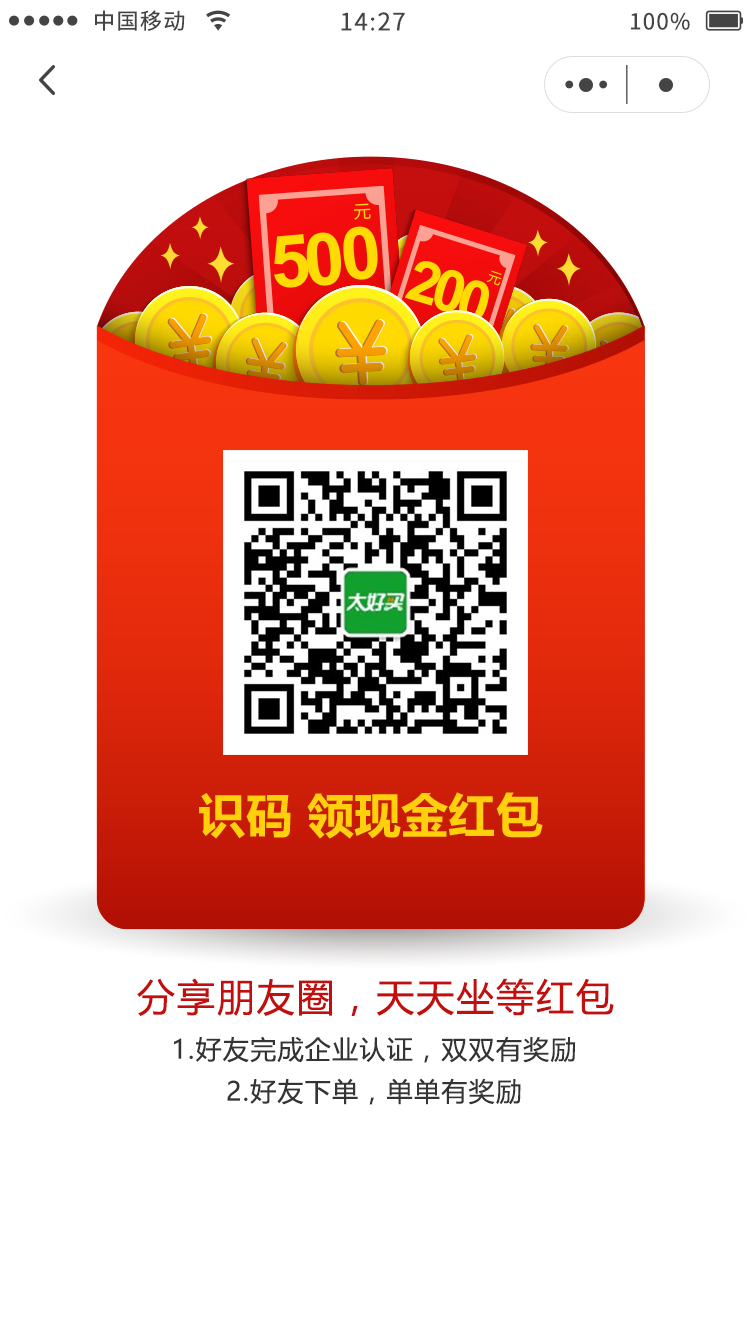
<style>
.page{position:relative;width:750px;height:1334px;background:#ffffff}
.page>*{position:absolute;margin:0}
.t1{font:22px "NotoSansCJKsc-Regular";letter-spacing:0.06em;color:#444444}
.t2{font:24px "NotoSansCJKsc-Regular";letter-spacing:0.06em;color:#444444}
.t3{font:38px "MicrosoftYaHei";letter-spacing:0.05em;color:#c30e0e}
.t4{font:26px/21px "MicrosoftYaHei";letter-spacing:0.05em;color:#353434}
</style>
<div class="page">
<p class="t1" style="left:95px;top:10px;width:90px;height:21px">中国移动</p>
<p class="t2" style="left:341px;top:12px;width:64px;height:19px">14:27</p>
<p class="t1" style="left:631px;top:12px;width:59px;height:18px">100%</p>
<p class="t3" style="left:137px;top:978px;width:477px;height:38px">分享朋友圈，天天坐等红包</p>
<p class="t4" style="left:174px;top:1036px;width:402px;height:69px;text-align:center">1.好友完成企业认证，双双有奖励<br><br>2.好友下单，单单有奖励</p>
</div>
